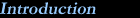
<style>
.page{position:relative;width:140px;height:18px;background:#000000}
.page>*{position:absolute;margin:0}
.t1{font:18px "Garamond-Bold";color:#99ccff;font-style:italic}
</style>
<div class="page">
<p class="t1" style="left:0px;top:2px;width:96px;height:13px">Introduction</p>
</div>
